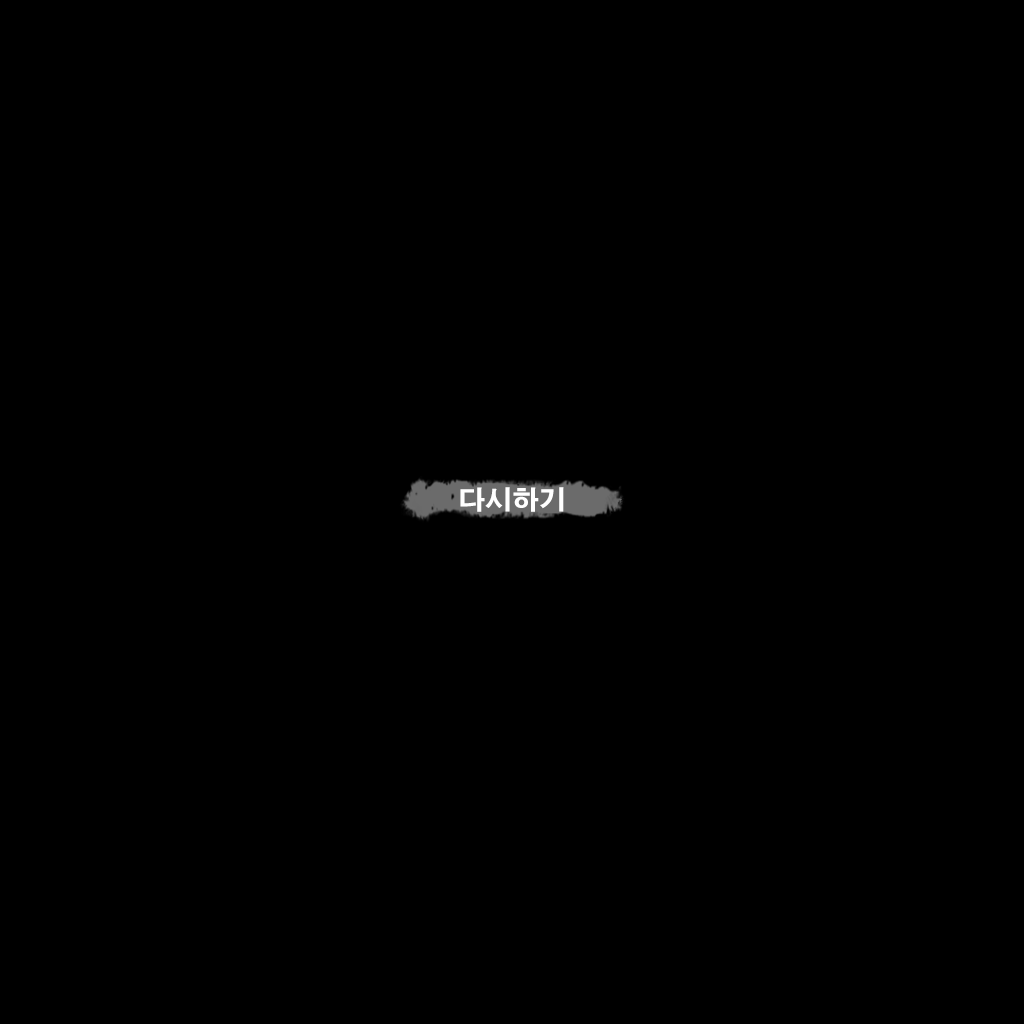
<style>
.page{position:relative;width:1024px;height:1024px;background:#000000}
.page>*{position:absolute;margin:0}
.t1{font:26px "HYgtrE";color:#ffffff;scale:1.04 1}
</style>
<div class="page">
<p class="t1" style="left:460px;top:487px;width:104px;height:25px">다시하기</p>
</div>
